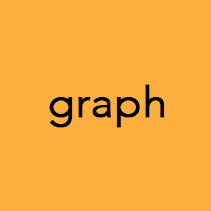
<style>
.page{position:relative;width:211px;height:211px;background:#fcaf3e}
.page>*{position:absolute;margin:0}
.t1{font:43.8px "Avenir-Light";color:#000000;font-weight:bold}
</style>
<div class="page">
<p class="t1" style="left:49px;top:84px;width:116px;height:44px">graph</p>
</div>
